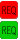
<style>
.page{position:relative;width:20px;height:40px;background:#06cd06}
.page>*{position:absolute;margin:0}
.t1{font:11.2px "CopperplateGothic-Light";color:#000000;scale:0.53 1}
</style>
<div class="page">
<p class="t1" style="left:2px;top:6px;width:14px;height:10px">REQ</p>
<p class="t1" style="left:2px;top:26px;width:14px;height:10px">REQ</p>
</div>
